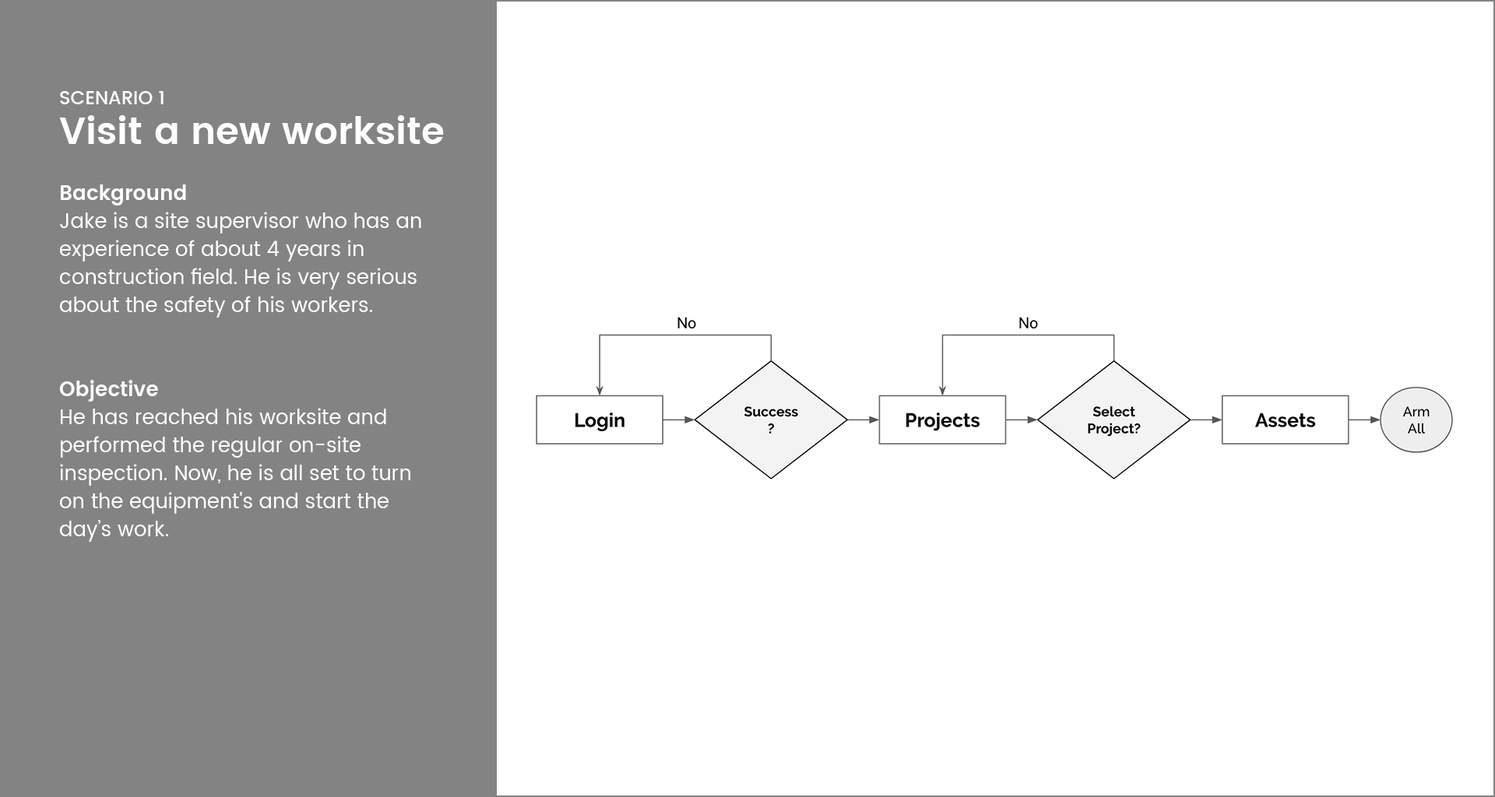
<style>
.page{position:relative;width:1495px;height:797px;background:#ffffff}
.page>*{position:absolute;margin:0}
.t1{font:20.2px/28px "Poppins-Regular";color:#ffffff}
.t2{font:18.7px/39.7px "Poppins-Medium";color:#ffffff}
.t3{font:37.4px/39.7px "Poppins-SemiBold";color:#ffffff}
.t4{font:37.4px/28px "Poppins-SemiBold";color:#ffffff}
.t5{font:20.2px/28px "Poppins-SemiBold";color:#ffffff}
</style>
<div class="page">
<p class="t1" style="left:59px;top:91px;width:385px;height:451px"><span class="t2">SCENARIO 1 <br></span><span class="t3">Visit a new </span><span class="t4">worksite<br><br></span><span class="t5">Background<br></span>Jake is a site supervisor who has an<br>experience of about 4 years in<br>construction field. He is very serious<br>about the safety of his workers.<br><br><br><span class="t5">Objective <br></span>He has reached his worksite and<br>performed the regular on-site<br>inspection. Now, he is all set to turn<br>on the equipment's and start the<br>day’s work.</p>
</div>
